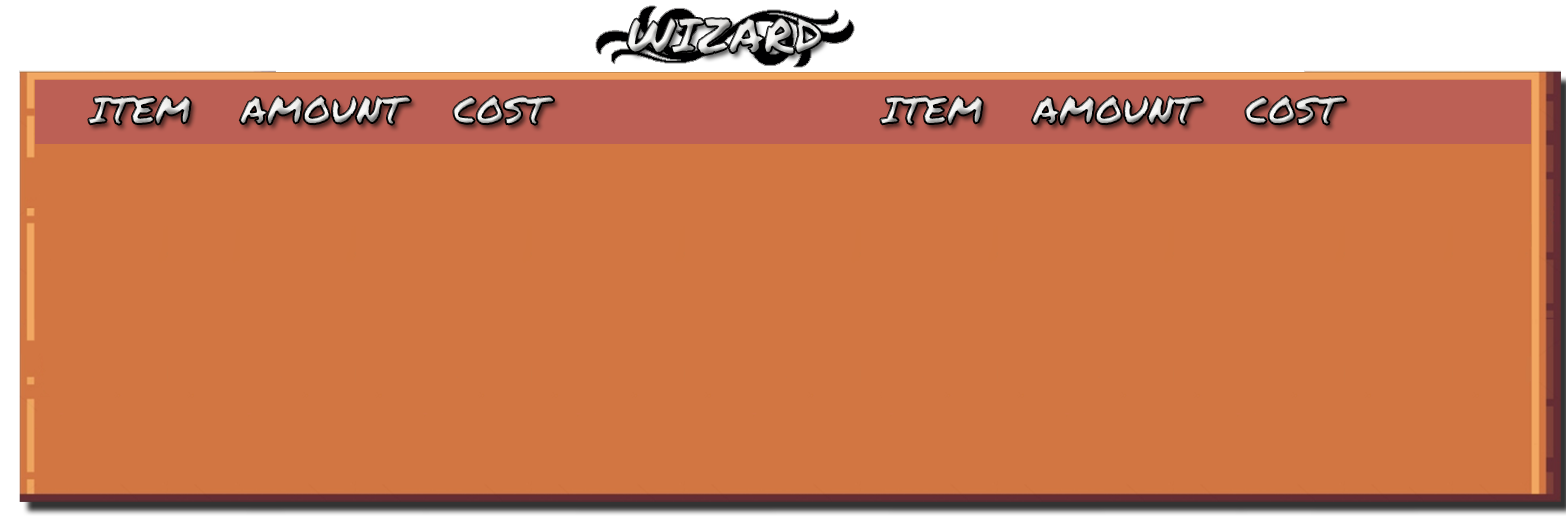
<style>
.page{position:relative;width:1566px;height:525px;background:#d27642}
.page>*{position:absolute;margin:0}
.t1{font:48px "PermanentMarker"}
.t2{font:37.3px "PermanentMarker"}
</style>
<div class="page">
<p class="t1" style="left:627px;top:17px;width:195px;height:38px">WIZARD</p>
<p class="t2" style="left:88px;top:96px;width:103px;height:29px">ITEM</p>
<p class="t2" style="left:239px;top:96px;width:172px;height:29px">AMOUNT</p>
<p class="t2" style="left:453px;top:96px;width:101px;height:29px">COST</p>
<p class="t2" style="left:880px;top:96px;width:103px;height:29px">ITEM</p>
<p class="t2" style="left:1031px;top:96px;width:172px;height:29px">AMOUNT</p>
<p class="t2" style="left:1245px;top:96px;width:101px;height:29px">COST</p>
</div>
